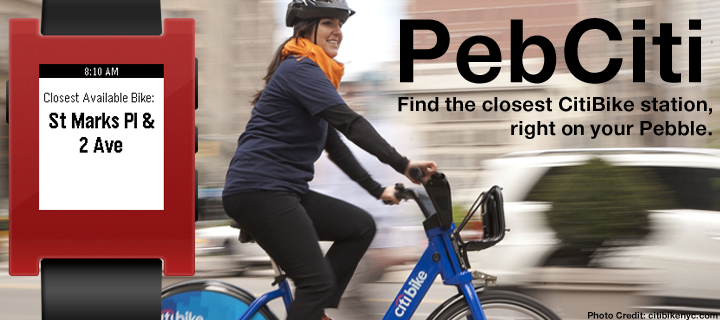
<style>
.page{position:relative;width:720px;height:320px}
.page>*{position:absolute;margin:0}
.t1{font:88px "AppleSDGothicNeo-ExtraBold";color:#000000}
.t2{font:20px "AppleSDGothicNeo-ExtraBold";color:#000000}
.t3{font:9px "AppleSDGothicNeo-ExtraBold";color:#000000}
</style>
<div class="page">
<p class="t1" style="left:400px;top:18px;width:301px;height:66px">PebCiti</p>
<p class="t2" style="left:398px;top:96px;width:314px;height:43px;text-align:right">Find the closest CitiBike station,<br>right on your Pebble.</p>
<p class="t3" style="left:588px;top:312px;width:130px;height:9px">Photo Credit: citibikenyc.com</p>
</div>
